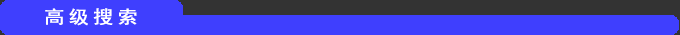
<style>
.page{position:relative;width:680px;height:35px;background:#3f3ffe}
.page>*{position:absolute;margin:0}
.t1{font:18px "SimHei";letter-spacing:0.2em;color:#ffffff;font-weight:bold;scale:1.11 1}
</style>
<div class="page">
<p class="t1" style="left:45px;top:8px;width:92px;height:18px">高级搜索</p>
</div>
